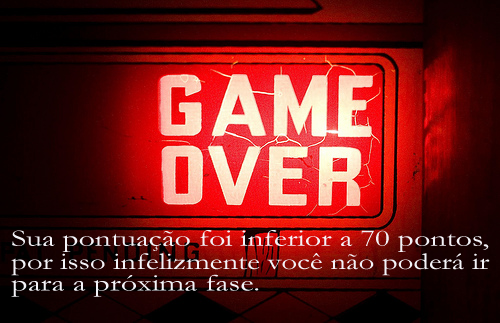
<style>
.page{position:relative;width:500px;height:323px}
.page>*{position:absolute;margin:0}
.t1{font:24px "Garamond";color:#f3f3f8;scale:1.32 1}
.t2{font:24px "Garamond";color:#f3f3f8;scale:1.28 1}
.t3{font:24px "Garamond";color:#f3f3f8;scale:1.34 1}
</style>
<div class="page">
<p class="t1" style="left:12px;top:230px;width:477px;height:22px">Sua pontuação foi inferior a 70 pontos,</p>
<p class="t2" style="left:11px;top:253px;width:479px;height:23px">por isso infelizmente você não poderá ir</p>
<p class="t3" style="left:11px;top:274px;width:248px;height:23px">para a próxima fase.</p>
</div>
